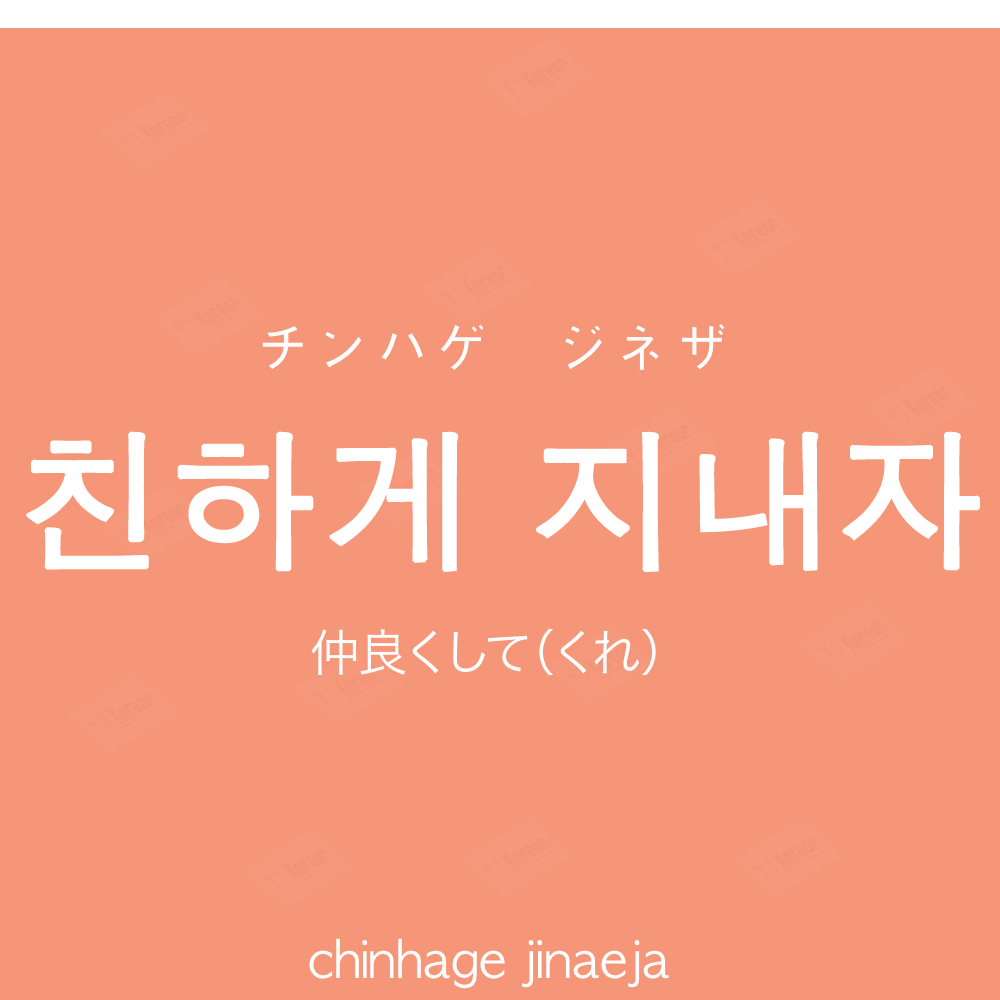
<style>
.page{position:relative;width:1000px;height:1000px;background:#f69679}
.page>*{position:absolute;margin:0}
.t1{font:60px "AppleGothic";color:#ffffff}
.t2{font:150px "AppleGothic";color:#ffffff;font-weight:bold}
.t3{font:50px "HiraKakuProN-W3";color:#ffffff}
.t4{font:50px "AppleGothic";color:#ffffff}
</style>
<div class="page">
<p class="t1" style="left:262px;top:324px;width:463px;height:46px">チンハゲ　ジネザ</p>
<p class="t2" style="left:26px;top:431px;width:954px;height:142px">친하게 지내자</p>
<p class="t3" style="left:311px;top:628px;width:345px;height:48px">仲良くして（くれ）</p>
<p class="t4" style="left:309px;top:938px;width:360px;height:51px">chinhage jinaeja</p>
</div>
